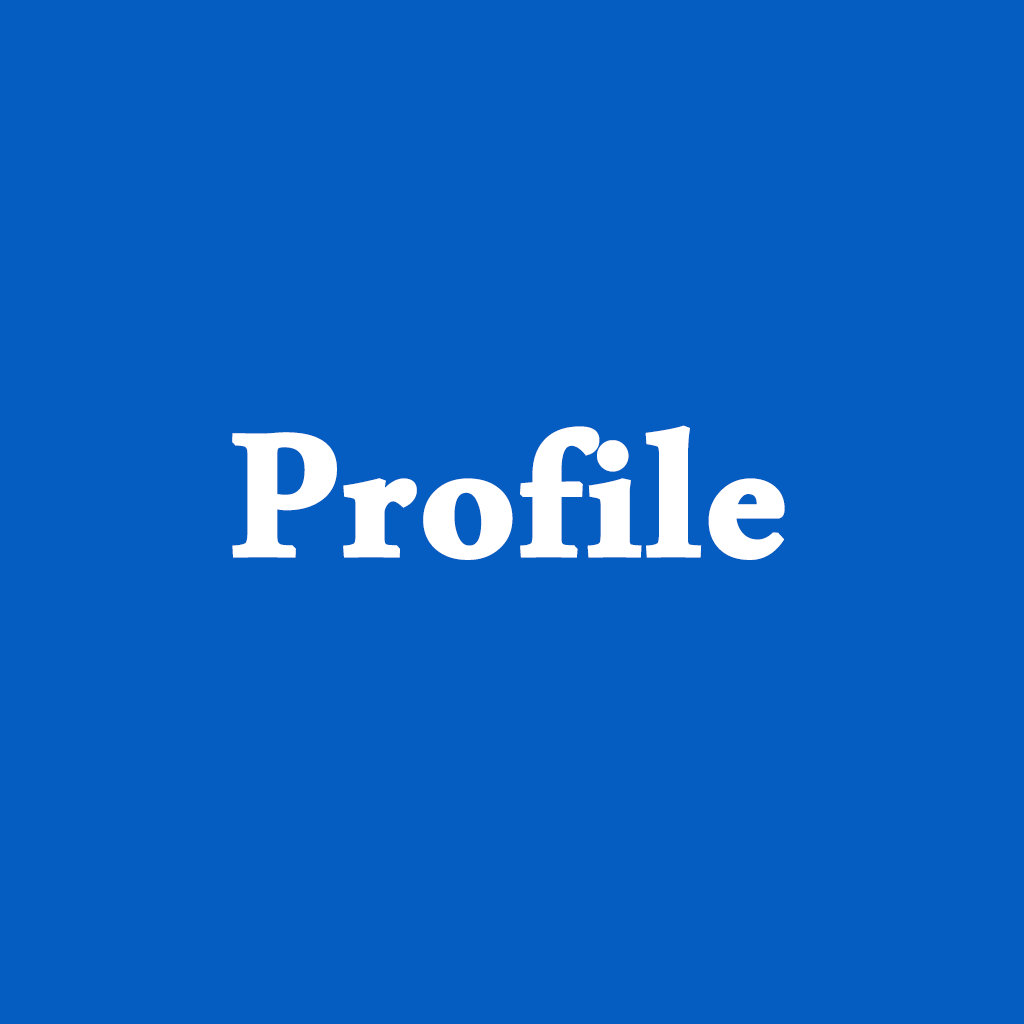
<style>
.page{position:relative;width:1024px;height:1024px;background:#055dc2}
.page>*{position:absolute;margin:0}
.t1{font:250px "MicrosoftUighur-Bold";color:#ffffff;font-weight:bold}
</style>
<div class="page">
<p class="t1" style="left:232px;top:425px;width:553px;height:135px">Profile</p>
</div>
